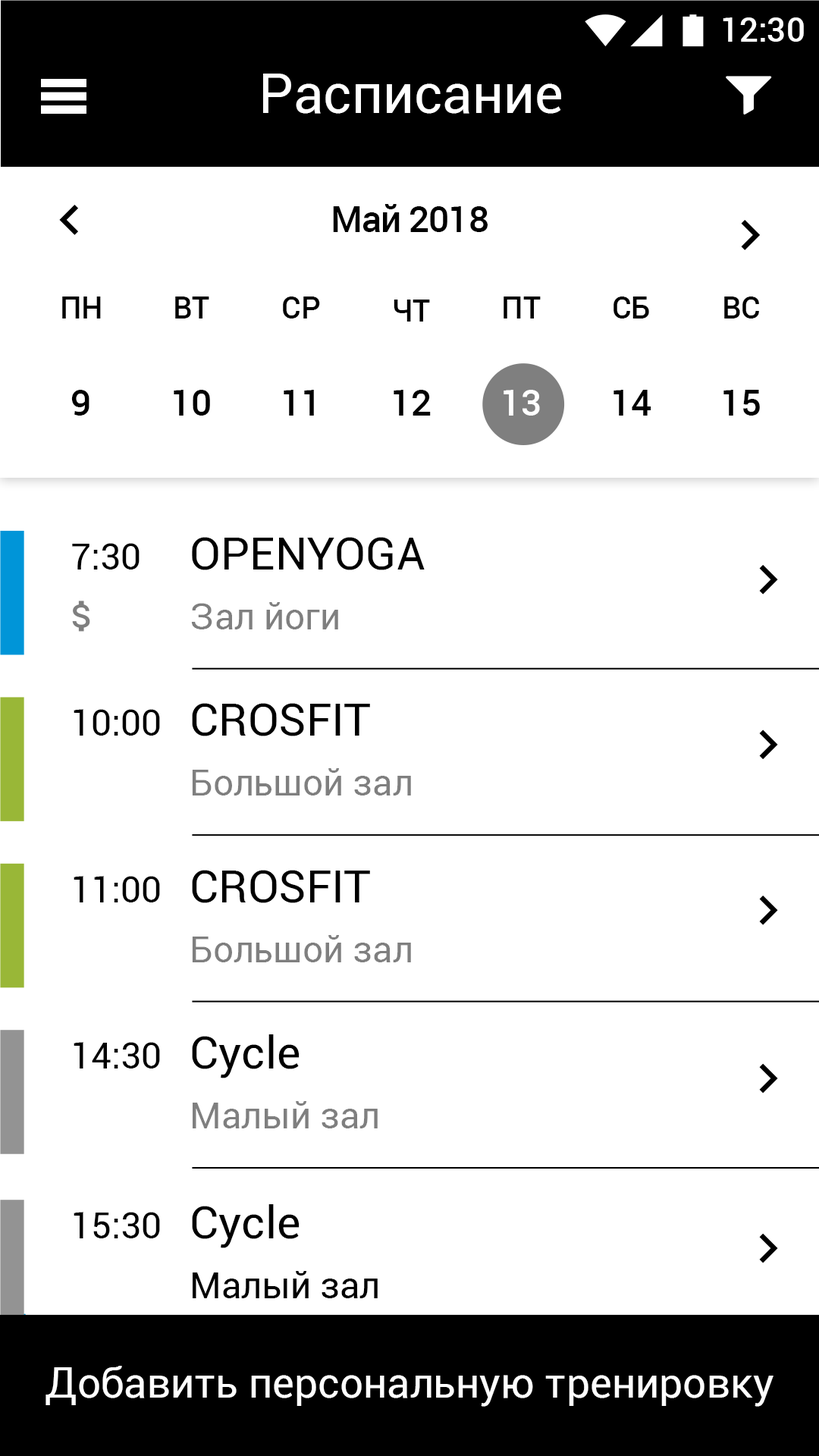
<style>
.page{position:relative;width:819px;height:1456px;background:#ffffff}
.page>*{position:absolute;margin:0}
.t1{font:33.4px "Roboto-Medium";color:#ffffff}
.t2{font:54.6px "Roboto-Regular";color:#ffffff}
.t3{font:36.4px "Roboto-Medium";letter-spacing:-0.023em;color:#000000}
.t4{font:30.2px "Roboto-Medium";color:#000000}
.t5{font:36.4px "Roboto-Medium";color:#000000}
.t6{font:36.4px "Roboto-Medium";color:#ffffff}
.t7{font:36.4px "Roboto-Regular";color:#000000}
.t8{font:45.5px "Roboto-Regular";color:#000000}
.t9{font:36.4px "Roboto-Regular";color:#7f7f7f}
.t10{font:41.7px "Roboto-Regular";color:#ffffff}
</style>
<div class="page">
<p class="t1" style="left:723px;top:17px;width:81px;height:25px">12:30</p>
<p class="t2" style="left:263px;top:74px;width:298px;height:40px">Расписание</p>
<p class="t3" style="left:333px;top:204px;width:155px;height:28px">Май 2018</p>
<p class="t4" style="left:62px;top:297px;width:39px;height:21px">ПН</p>
<p class="t4" style="left:175px;top:297px;width:34px;height:21px">ВТ</p>
<p class="t4" style="left:283px;top:297px;width:37px;height:21px">СР</p>
<p class="t4" style="left:394px;top:300px;width:36px;height:22px">ЧТ</p>
<p class="t4" style="left:504px;top:297px;width:37px;height:21px">ПТ</p>
<p class="t4" style="left:613px;top:297px;width:36px;height:21px">СБ</p>
<p class="t4" style="left:724px;top:297px;width:35px;height:21px">ВС</p>
<p class="t5" style="left:71px;top:390px;width:18px;height:26px">9</p>
<p class="t5" style="left:174px;top:390px;width:36px;height:26px">10</p>
<p class="t5" style="left:284px;top:390px;width:30px;height:26px">11</p>
<p class="t5" style="left:394px;top:390px;width:37px;height:26px">12</p>
<p class="t6" style="left:504px;top:390px;width:36px;height:26px">13</p>
<p class="t5" style="left:613px;top:390px;width:38px;height:26px">14</p>
<p class="t5" style="left:723px;top:390px;width:37px;height:26px">15</p>
<p class="t7" style="left:72px;top:543px;width:68px;height:27px">7:30</p>
<p class="t8" style="left:192px;top:537px;width:233px;height:33px">OPENYOGA</p>
<p class="t9" style="left:191px;top:602px;width:147px;height:27px">Зал йоги</p>
<p class="t7" style="left:74px;top:709px;width:86px;height:27px">10:00</p>
<p class="t8" style="left:192px;top:703px;width:178px;height:33px">CROSFIT</p>
<p class="t9" style="left:192px;top:768px;width:219px;height:27px">Большой зал</p>
<p class="t8" style="left:192px;top:870px;width:178px;height:33px">CROSFIT</p>
<p class="t7" style="left:74px;top:876px;width:86px;height:26px">11:00</p>
<p class="t9" style="left:192px;top:935px;width:219px;height:27px">Большой зал</p>
<p class="t8" style="left:192px;top:1034px;width:108px;height:44px">Cycle</p>
<p class="t7" style="left:74px;top:1042px;width:86px;height:26px">14:30</p>
<p class="t9" style="left:193px;top:1101px;width:185px;height:27px">Малый зал</p>
<p class="t8" style="left:192px;top:1204px;width:108px;height:44px">Cycle</p>
<p class="t7" style="left:74px;top:1212px;width:86px;height:26px">15:30</p>
<p class="t7" style="left:193px;top:1271px;width:185px;height:27px">Малый зал</p>
<p class="t10" style="left:45px;top:1366px;width:728px;height:41px">Добавить персональную тренировку</p>
</div>
